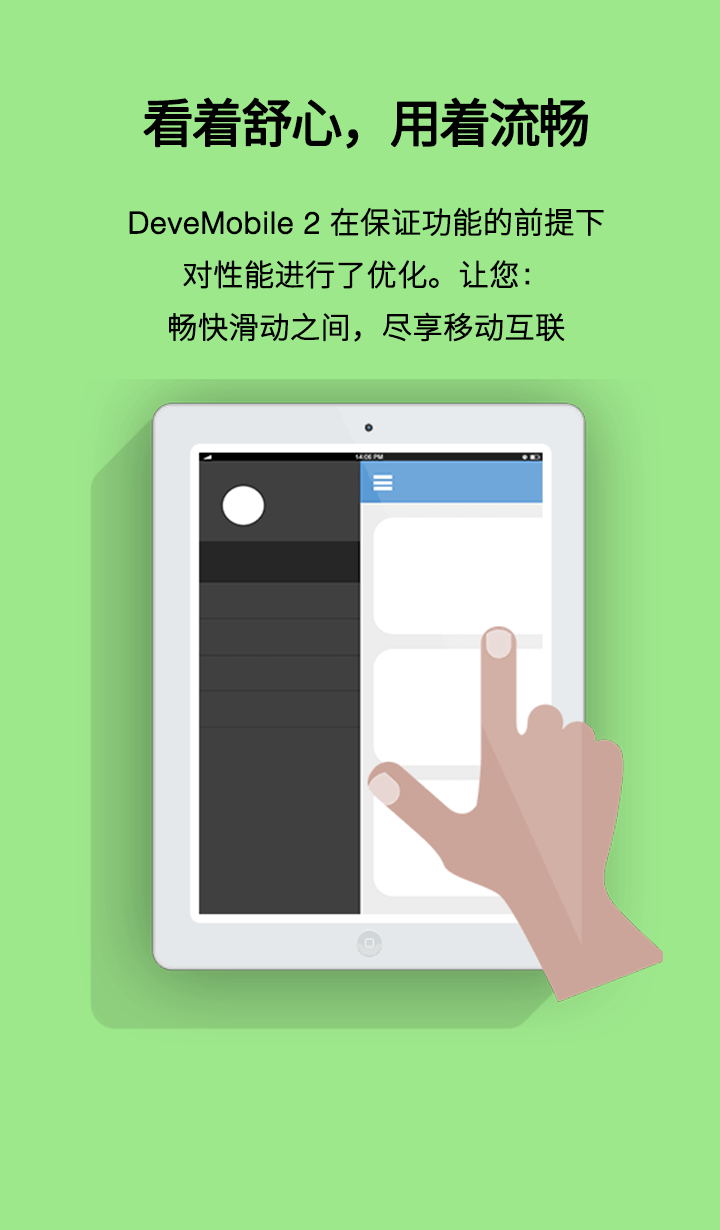
<style>
.page{position:relative;width:720px;height:1230px;background:#9ee88c}
.page>*{position:absolute;margin:0}
.t1{font:52px "SourceHanSansCN-Regular";letter-spacing:-0.075em;color:#000000;font-weight:bold}
.t2{font:30px "SourceHanSansCN-Light";letter-spacing:-0.005em;color:#000000;font-weight:bold}
.t3{font:30px "Helvetica-Light";letter-spacing:-0.005em;color:#000000;font-weight:bold}
.t4{font:30px "STHeitiSC-Light";letter-spacing:-0.005em;color:#000000;font-weight:bold}
</style>
<div class="page">
<p class="t1" style="left:143px;top:97px;width:445px;height:52px">看着舒心，用着流畅</p>
<p class="t2" style="left:129px;top:207px;width:475px;height:135px;text-align:center"><span class="t3">DeveMobile 2 </span>在保证功能的前提下对性能进行了优化。让您<span class="t4">：<br></span>畅快滑动之间，尽享移动互联</p>
</div>
